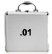
<style>
.page{position:relative;width:52px;height:54px;background:#ffffff}
.page>*{position:absolute;margin:0}
.t1{font:9px "Arial-BoldMT";color:#000000}
</style>
<div class="page">
<p class="t1" style="left:20px;top:29px;width:11px;height:7px">.01</p>
</div>
